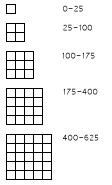
<style>
.page{position:relative;width:112px;height:185px;background:#ffffff}
.page>*{position:absolute;margin:0}
.t1{font:12.5px "Vrinda"}
</style>
<div class="page">
<p class="t1" style="left:63px;top:5px;width:20px;height:7px">0-25</p>
<p class="t1" style="left:63px;top:24px;width:29px;height:7px">25-100</p>
<p class="t1" style="left:62px;top:52px;width:33px;height:7px">100-175</p>
<p class="t1" style="left:63px;top:88px;width:35px;height:7px">175-400</p>
<p class="t1" style="left:63px;top:134px;width:36px;height:7px">400-625</p>
</div>
